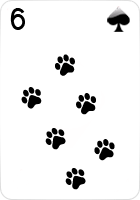
<style>
.page{position:relative;width:140px;height:200px;background:#ffffff}
.page>*{position:absolute;margin:0}
.t1{font:26px "CardCharacters";color:#000000}
</style>
<div class="page">
<p class="t1" style="left:10px;top:8px;width:15px;height:22px">6</p>
</div>
